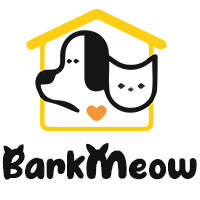
<style>
.page{position:relative;width:200px;height:200px;background:#ffffff}
.page>*{position:absolute;margin:0}
.t1{font:50px "Cattyla";color:#131313}
</style>
<div class="page">
<p class="t1" style="left:2px;top:143px;width:195px;height:37px">BarkMeow</p>
</div>
